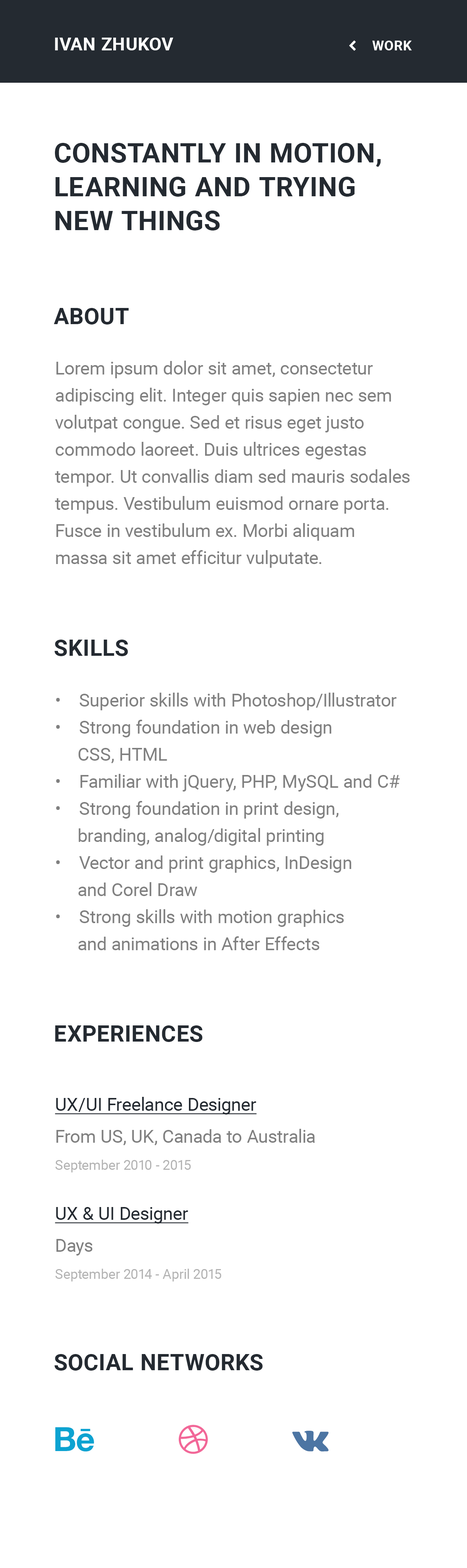
<style>
.page{position:relative;width:467px;height:1568px;background:#ffffff}
.page>*{position:absolute;margin:0}
.t1{font:18px "Roboto-Bold";letter-spacing:0.025em;color:#ffffff}
.t2{font:13.5px "Roboto-Bold";letter-spacing:0.025em;color:#ffffff}
.t3{font:27.1px/33.8px "Roboto-Bold";letter-spacing:0.025em;color:#242a31;text-transform:uppercase}
.t4{font:22.6px "Roboto-Bold";letter-spacing:0.025em;color:#242a31;text-transform:uppercase}
.t5{font:18px/27.1px "Roboto-Regular";color:#808080}
.t6{font:18px/32px "Roboto-Regular";color:#808080}
.t7{font:18px/32px "Roboto-Regular";color:#242a31;text-decoration:underline}
.t8{font:13.5px/27.1px "Roboto-Regular";color:#b3b3b3}
</style>
<div class="page">
<p class="t1" style="left:55px;top:38px;width:118px;height:12px">IVAN ZHUKOV</p>
<p class="t2" style="left:372px;top:41px;width:40px;height:9px">WORK</p>
<p class="t3" style="left:55px;top:143px;width:326px;height:87px">Constantly in motion, <br>learning and trying <br>new things</p>
<p class="t4" style="left:54px;top:308px;width:75px;height:17px">ABOUT</p>
<p class="t5" style="left:55px;top:361px;width:354px;height:207px">Lorem ipsum dolor sit amet, consectetur adipiscing elit. Integer quis sapien nec sem volutpat congue. Sed et risus eget justo commodo laoreet. Duis ultrices egestas tempor. Ut convallis diam sed mauris sodales tempus. Vestibulum euismod ornare porta. Fusce in vestibulum ex. Morbi aliquam massa sit amet efficitur vulputate.</p>
<p class="t4" style="left:55px;top:640px;width:73px;height:16px">SKILLS</p>
<p class="t5" style="left:56px;top:693px;width:343px;height:257px">•    Superior skills with Photoshop/Illustrator<br>•    Strong foundation in web design <br>     CSS, HTML<br>•    Familiar with jQuery, PHP, MySQL and C#<br>•    Strong foundation in print design, <br>     branding, analog/digital printing<br>•    Vector and print graphics, InDesign <br>     and Corel Draw<br>•    Strong skills with motion graphics <br>     and animations in After Effects</p>
<p class="t4" style="left:55px;top:1025px;width:147px;height:17px">EXPERIENCES</p>
<p class="t6" style="left:55px;top:1097px;width:260px;height:75px"><span class="t7">UX/UI Freelance Designer<br></span>From US, UK, Canada to Australia<br><span class="t8">September 2010 - 2015</span></p>
<p class="t8" style="left:55px;top:1207px;width:166px;height:74px"><span class="t7">UX &amp; UI Designer<br></span><span class="t6">Days<br></span>September 2014 - April 2015</p>
<p class="t4" style="left:55px;top:1354px;width:207px;height:17px">SOCIAL NETWORKS</p>
</div>
